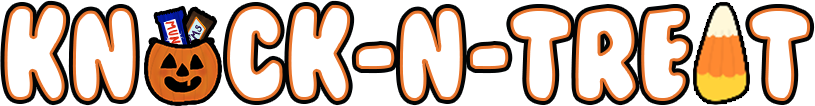
<style>
.page{position:relative;width:815px;height:106px;background:#ffffff}
.page>*{position:absolute;margin:0}
.t1{font:120px "BubbleGum";letter-spacing:-0.01em;color:#ffffff;scale:0.9 1}
</style>
<div class="page">
<p class="t1" style="left:4px;top:4px;width:807px;height:98px">Kn   ck-N-Tre  t</p>
</div>
